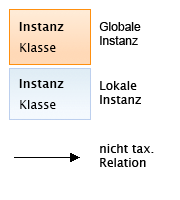
<style>
.page{position:relative;width:180px;height:200px;background:#ffffff}
.page>*{position:absolute;margin:0}
.t1{font:12px "LucidaGrande-Bold";color:#000000}
.t2{font:12px "ArialMT";color:#000000}
.t3{font:12px "LucidaGrande";color:#000000}
</style>
<div class="page">
<p class="t1" style="left:19px;top:22px;width:45px;height:9px">Instanz</p>
<p class="t2" style="left:99px;top:22px;width:42px;height:23px">Globale<br>Instanz</p>
<p class="t3" style="left:20px;top:43px;width:36px;height:9px">Klasse</p>
<p class="t1" style="left:19px;top:79px;width:45px;height:9px">Instanz</p>
<p class="t3" style="left:100px;top:81px;width:41px;height:23px">Lokale<br>Instanz</p>
<p class="t3" style="left:20px;top:100px;width:36px;height:9px">Klasse</p>
<p class="t3" style="left:100px;top:144px;width:54px;height:23px">nicht tax.<br>Relation</p>
</div>
